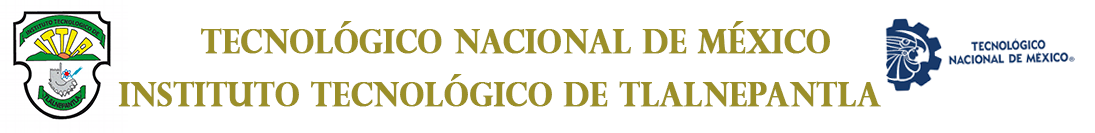
<style>
.page{position:relative;width:1095px;height:133px;background:#ffffff}
.page>*{position:absolute;margin:0}
.t1{font:33px "PerpetuaTitlingMT-Bold";color:#9b8f29;font-weight:bold;scale:0.91 1}
.t2{font:34.7px "PerpetuaTitlingMT-Bold";color:#9b8f29;font-weight:bold;scale:0.91 1}
</style>
<div class="page">
<p class="t1" style="left:118px;top:21px;width:763px;height:86px;text-align:center"><span class="t2"><br> </span> tecnológico Nacional de méxico<br><br>instituto tecnológico de Tlalnepantla</p>
</div>
